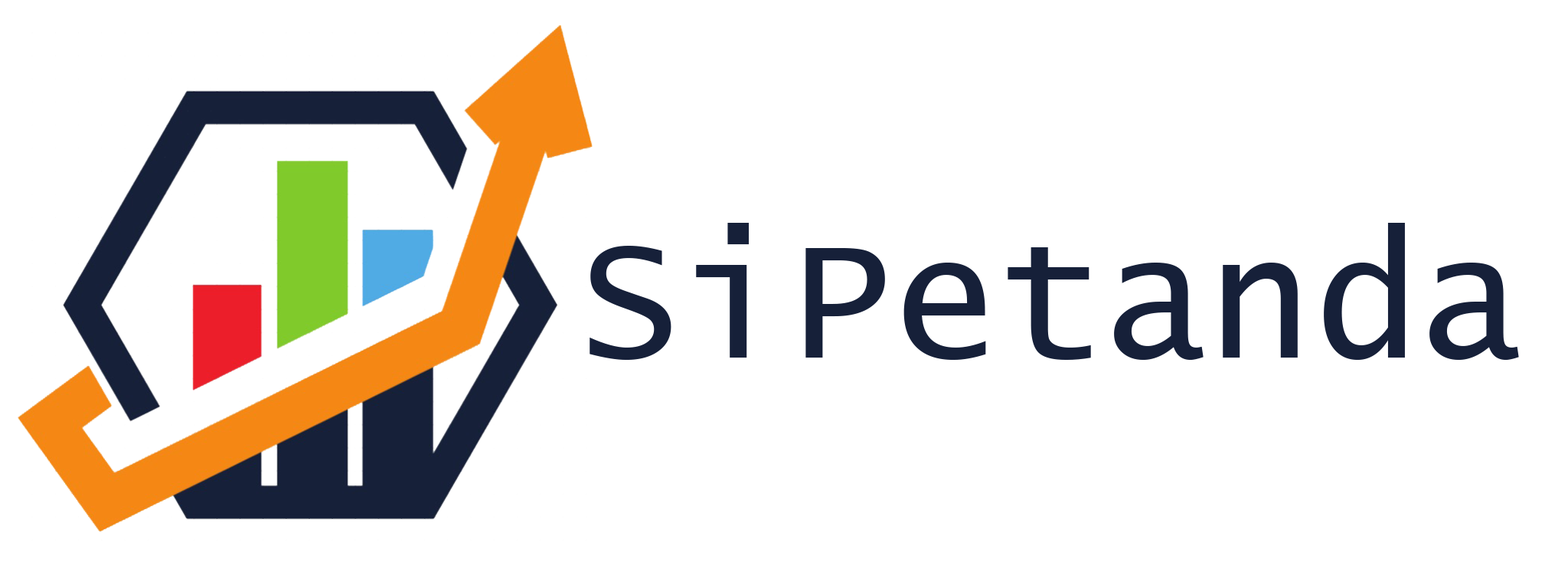
<style>
.page{position:relative;width:1568px;height:588px;background:#ffffff}
.page>*{position:absolute;margin:0}
.t1{font:174.7px "LucidaConsole";color:#162039}
</style>
<div class="page">
<p class="t1" style="left:590px;top:223px;width:929px;height:137px">SiPetanda</p>
</div>
